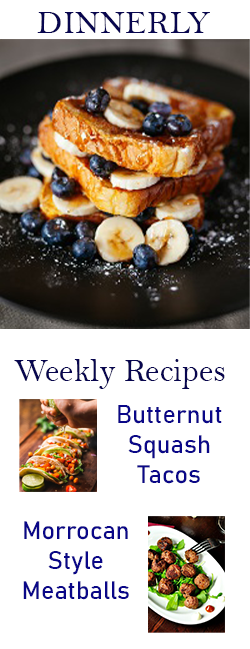
<style>
.page{position:relative;width:250px;height:649px;background:#ffffff}
.page>*{position:absolute;margin:0}
.t1{font:33.3px "BellMT";color:#08064f}
.t2{font:25px "Bahnschrift";color:#0a0788}
</style>
<div class="page">
<p class="t1" style="left:37px;top:12px;width:173px;height:21px">DINNERLY</p>
<p class="t1" style="left:14px;top:359px;width:211px;height:30px">Weekly Recipes</p>
<p class="t2" style="left:118px;top:405px;width:104px;height:79px;text-align:center">Butternut Squash<br>Tacos</p>
<p class="t2" style="left:23px;top:521px;width:106px;height:79px;text-align:center">Morrocan Style Meatballs</p>
</div>
